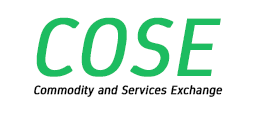
<style>
.page{position:relative;width:255px;height:113px;background:#ffffff}
.page>*{position:absolute;margin:0}
.t1{font:81.8px "Gidole-Regular";color:#1dbc60;font-weight:bold;font-style:italic}
.t2{font:12px "Gidole-Regular";color:#000000;font-weight:bold;font-style:italic}
</style>
<div class="page">
<p class="t1" style="left:36px;top:17px;width:185px;height:60px">COSE</p>
<p class="t2" style="left:34px;top:85px;width:189px;height:12px">Commodity and Services Exchange</p>
</div>
